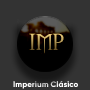
<style>
.page{position:relative;width:90px;height:90px;background:#333333}
.page>*{position:absolute;margin:0}
.t1{font:21.5px "Morpheus";text-transform:uppercase}
.t2{font:8.1px "Gilroy-ExtraBold";color:#ffffff}
</style>
<div class="page">
<p class="t1" style="left:29px;top:33px;width:35px;height:22px">imp</p>
<p class="t2" style="left:13px;top:81px;width:65px;height:8px">Imperium Clásico</p>
</div>
